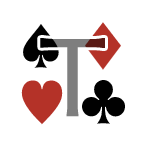
<style>
.page{position:relative;width:144px;height:144px;background:#ffffff}
.page>*{position:absolute;margin:0}
.t1{font:50px "HiraKakuProN-W3";color:#010101;text-transform:uppercase}
.t2{font:50px "HiraKakuProN-W3";color:#b43228;text-transform:uppercase}
.t3{font:100px "HiraKakuProN-W3";color:#7e7e7e;text-transform:uppercase;font-weight:bold}
</style>
<div class="page">
<p class="t1" style="left:23px;top:24px;width:36px;height:44px">♠</p>
<p class="t2" style="left:85px;top:22px;width:36px;height:48px">♦</p>
<p class="t3" style="left:40px;top:38px;width:65px;height:79px">T</p>
<p class="t2" style="left:21px;top:80px;width:42px;height:45px">♥</p>
<p class="t1" style="left:82px;top:80px;width:43px;height:44px">♣</p>
</div>
